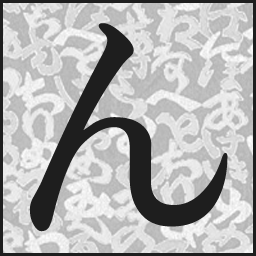
<style>
.page{position:relative;width:256px;height:256px}
.page>*{position:absolute;margin:0}
.t1{font:250px "DFMinchoP-W5-WING-RKSJ-H";color:#1e1e1e}
</style>
<div class="page">
<p class="t1" style="left:29px;top:23px;width:199px;height:209px">ん</p>
</div>
